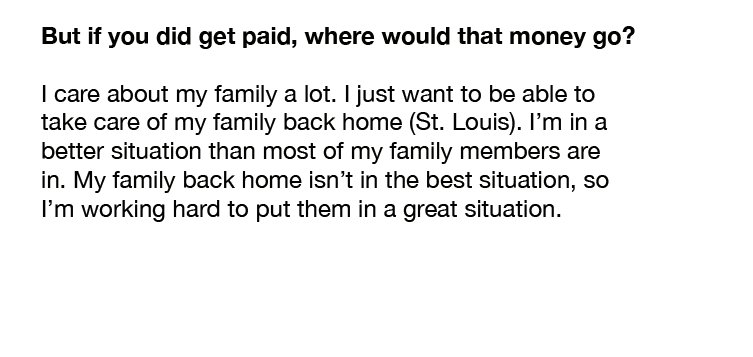
<style>
.page{position:relative;width:753px;height:357px;background:#ffffff}
.page>*{position:absolute;margin:0}
.t1{font:24px "HelveticaNeue";color:#020201}
.t2{font:24px "HelveticaNeue-Bold";color:#020201}
</style>
<div class="page">
<p class="t1" style="left:41px;top:26px;width:594px;height:196px"><span class="t2">But if you did get paid, where would that money go?<br></span><br>I care about my family a lot. I just want to be able to <br>take care of my family back home (St. Louis). I’m in a <br>better situation than most of my family members are <br>in. My family back home isn’t in the best situation, so <br>I’m working hard to put them in a great situation.</p>
</div>
